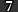
<style>
.page{position:relative;width:18px;height:12px;background:#333333}
.page>*{position:absolute;margin:0}
.t1{font:17px "Perpetua-Bold";color:#ffffff}
</style>
<div class="page">
<p class="t1" style="left:5px;top:1px;width:8px;height:10px">7</p>
</div>
